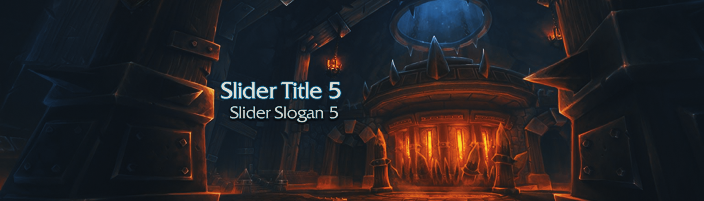
<style>
.page{position:relative;width:704px;height:201px}
.page>*{position:absolute;margin:0}
.t1{font:22.8px "BlizQuadrataWeb";color:#e2e2e2}
.t2{font:16.8px "BlizQuadrataWeb";color:#cfcfc7}
</style>
<div class="page">
<p class="t1" style="left:221px;top:82px;width:120px;height:17px">Slider Title 5</p>
<p class="t2" style="left:230px;top:106px;width:108px;height:17px">Slider Slogan 5</p>
</div>
